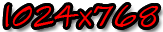
<style>
.page{position:relative;width:163px;height:32px;background:#000000}
.page>*{position:absolute;margin:0}
.t1{font:33.3px "SketchFlowPrint";color:#ff0000}
</style>
<div class="page">
<p class="t1" style="left:5px;top:5px;width:154px;height:22px">1024x768</p>
<p class="t1" style="left:5px;top:5px;width:154px;height:22px">1024x768</p>
</div>
